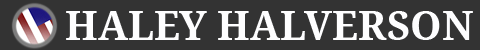
<style>
.page{position:relative;width:480px;height:50px;background:#333333}
.page>*{position:absolute;margin:0}
.t1{font:40px "DroidSerif-Bold";color:#fefeff}
</style>
<div class="page">
<p class="t1" style="left:66px;top:11px;width:407px;height:29px">HALEY HALVERSON</p>
</div>
